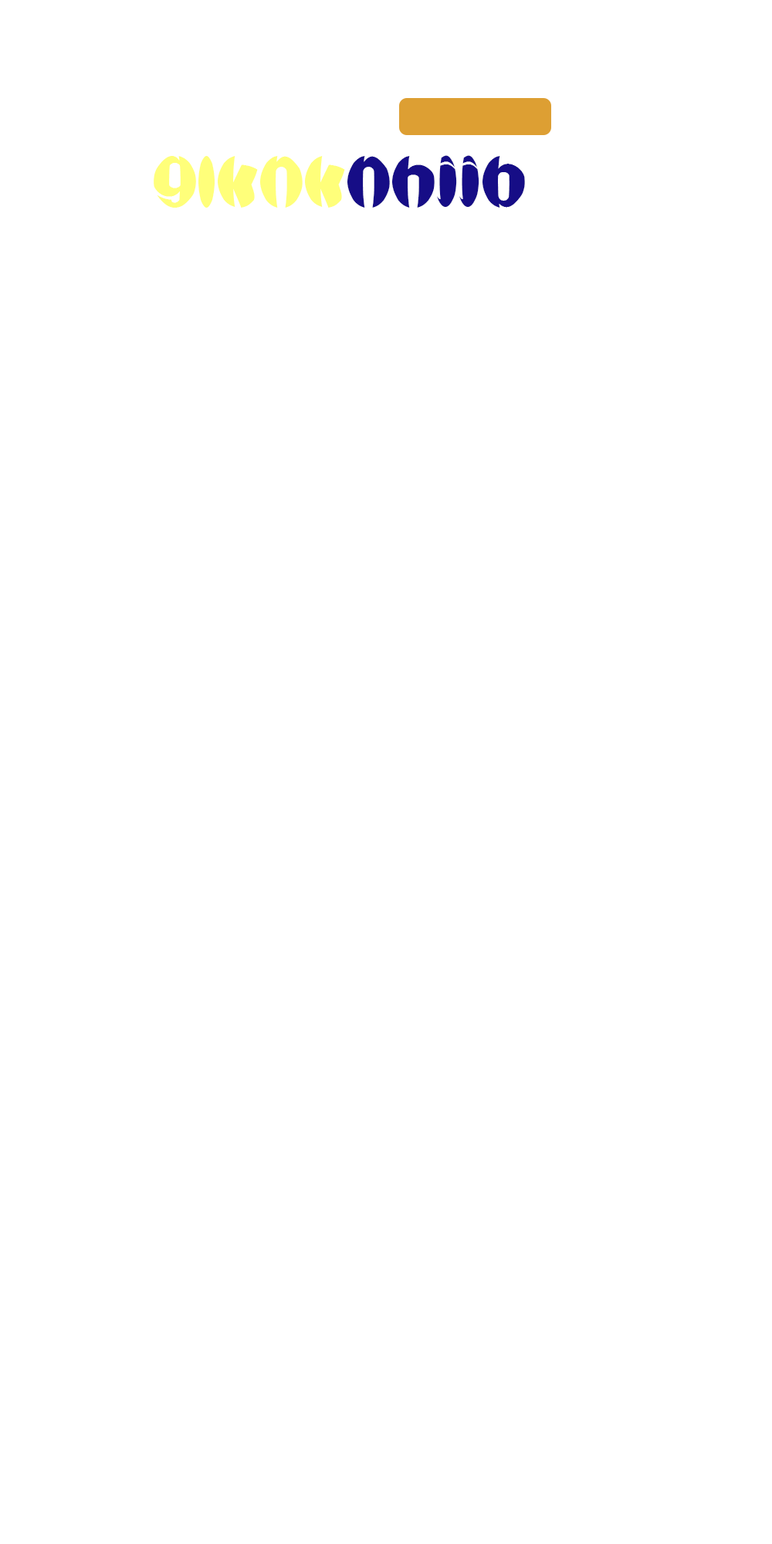
<style>
.page{position:relative;width:772px;height:1544px;background:#ffffff}
.page>*{position:absolute;margin:0}
.t1{font:55.2px "Aragones";color:#ffff7a}
.t2{font:55.2px "Aragones";color:#160d86}
</style>
<div class="page">
<p class="t1" style="left:154px;top:155px;width:371px;height:53px">glknk<span class="t2">nhjjb</span></p>
</div>
